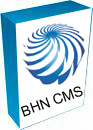
<style>
.page{position:relative;width:93px;height:130px;background:#ffffff}
.page>*{position:absolute;margin:0}
.t1{font:14px "ArialMT";color:#000000}
</style>
<div class="page">
<p class="t1" style="left:20px;top:86px;width:63px;height:31px;rotate:-20deg">BHN CMS</p>
</div>
